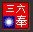
<style>
.page{position:relative;width:33px;height:32px;background:#f20000}
.page>*{position:absolute;margin:0}
.t1{font:10.4px "SimSun";color:#ffffff}
.t2{font:11.7px "SimSun";color:#ffffff}
</style>
<div class="page">
<p class="t1" style="left:6px;top:4px;width:19px;height:9px">三六</p>
<p class="t2" style="left:16px;top:15px;width:11px;height:12px">奉</p>
</div>
